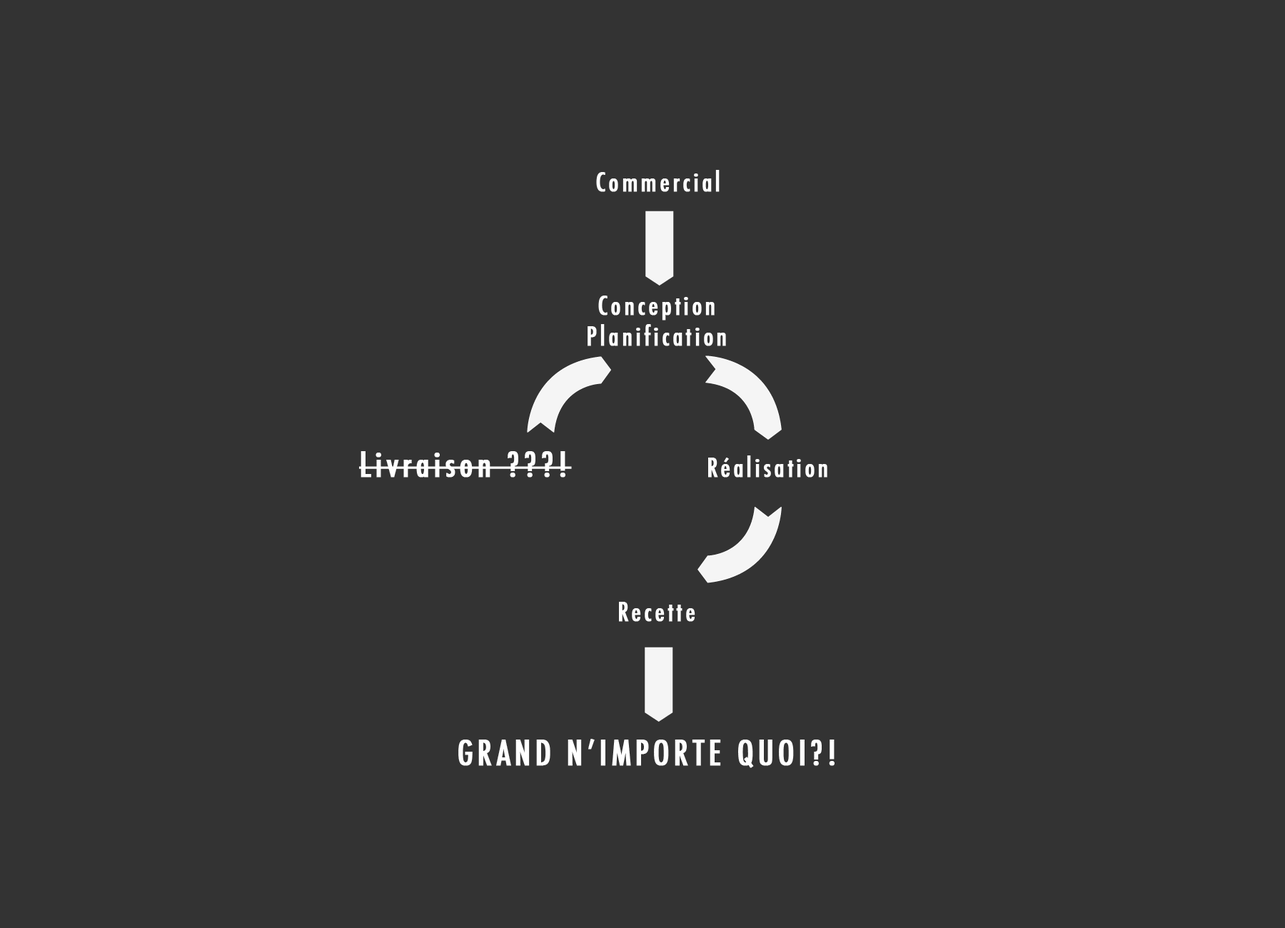
<style>
.page{position:relative;width:1285px;height:928px;background:#333333}
.page>*{position:absolute;margin:0}
.t1{font:25.7px "Futura-CondensedMedium";letter-spacing:0.1em;color:#ffffff;font-weight:bold}
.t2{font:34.3px "Futura-CondensedMedium";letter-spacing:0.1em;color:#ffffff;font-weight:bold}
</style>
<div class="page">
<p class="t1" style="left:596px;top:170px;width:124px;height:22px">Commercial</p>
<p class="t1" style="left:588px;top:296px;width:138px;height:50px;text-align:center">Conception<br>Planification</p>
<p class="t2" style="left:359px;top:451px;width:213px;height:27px">Livraison ???!</p>
<p class="t1" style="left:708px;top:455px;width:119px;height:23px">Réalisation</p>
<p class="t1" style="left:619px;top:602px;width:76px;height:20px">Recette</p>
<p class="t2" style="left:458px;top:739px;width:376px;height:29px">GRAND N’IMPORTE QUOI?!</p>
</div>
